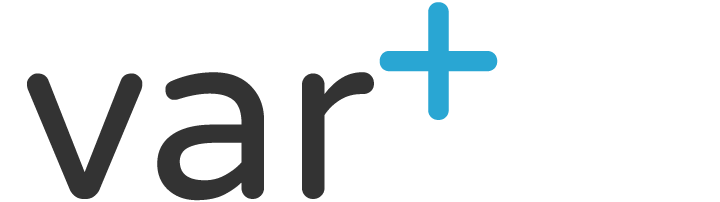
<style>
.page{position:relative;width:720px;height:202px;background:#ffffff}
.page>*{position:absolute;margin:0}
.t1{font:240px "VarelaRound-Regular";letter-spacing:-0.02em;color:#29a6d3;font-weight:bold}
.t2{font:240px "VarelaRound-Regular";letter-spacing:-0.02em;color:#333333;font-weight:bold}
</style>
<div class="page">
<p class="t1" style="left:379px;top:2px;width:119px;height:118px">+</p>
<p class="t2" style="left:27px;top:72px;width:347px;height:129px">var</p>
</div>
